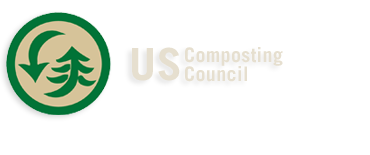
<style>
.page{position:relative;width:370px;height:155px;background:#ffffff}
.page>*{position:absolute;margin:0}
.t1{font:44.5px "TradeGothicLTStd-Bold";letter-spacing:0.02em;color:#e6dfcf}
.t2{font:20px/19.1px "TradeGothicLTStd-Bold";letter-spacing:0.02em;color:#e6dfcf}
</style>
<div class="page">
<p class="t1" style="left:132px;top:47px;width:48px;height:34px">US</p>
<p class="t2" style="left:185px;top:47px;width:98px;height:35px">Composting<br>Council</p>
</div>
